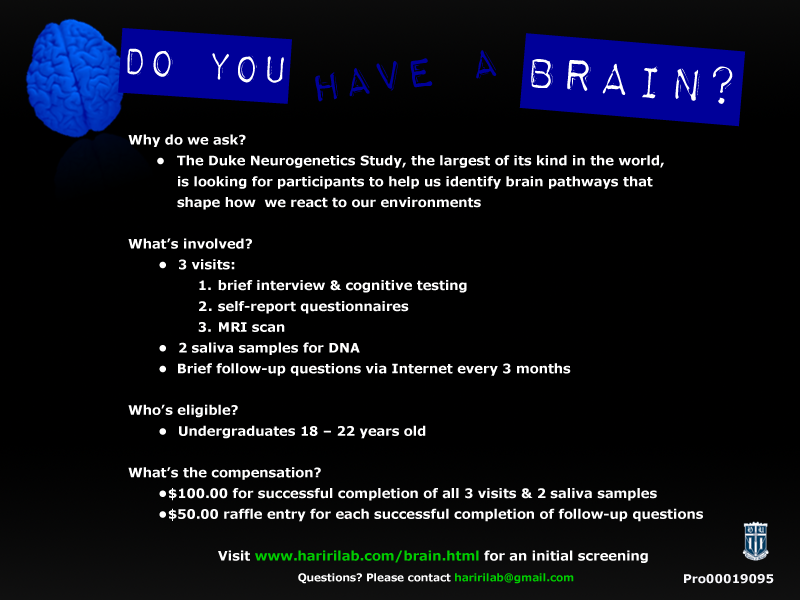
<style>
.page{position:relative;width:800px;height:600px;background:#000000}
.page>*{position:absolute;margin:0}
.t1{font:52.8px "ImpactLabel";color:#000099;scale:0.89 1}
.t2{font:61.1px "ImpactLabel";color:#000099}
.t3{font:53.1px "ImpactLabelReversed";color:#000099}
.t4{font:13px/20.8px "Verdana-Bold";color:#ffffff}
.t5{font:13px/20.8px "Verdana-Bold";color:#00cc00}
.t6{font:10.4px/20.8px "Verdana-Bold";color:#ffffff}
.t7{font:10.4px/20.8px "Verdana-Bold";color:#00cc00}
.t8{font:12px "Verdana-Bold";color:#f8f8fc}
</style>
<div class="page">
<p class="t1" style="left:118px;top:28px;width:174px;height:76px;rotate:4deg">DO YOU</p>
<p class="t2" style="left:519px;top:33px;width:227px;height:94px;rotate:5deg">BRAIN?</p>
<p class="t3" style="left:315px;top:50px;width:182px;height:52px;rotate:-8deg">HAVE A</p>
<p class="t4" style="left:128px;top:134px;width:575px;height:450px">Why do we ask?<br>     •   The Duke Neurogenetics Study, the largest of its kind in the world, <br>           is looking for participants to help us identify brain pathways that <br>           shape how  we react to our environments<br><br>What’s involved?<br>   •  3 visits:<br>       1. brief interview &amp; cognitive testing<br>       2 . self-report questionnaires<br>       3. MRI scan<br>   •  2 saliva samples for DNA<br>   •   Brief follow-up questions via Internet every 3 months<br><br>Who’s eligible?<br>   •  Undergraduates 18 – 22 years old<br><br>What’s the compensation?<br>   • $100.00 for successful completion of all 3 visits &amp; 2 saliva samples<br>   • $50.00 raffle entry for each successful completion of follow-up questions<br><br>         Visit <span class="t5">www.haririlab.com/brain.html</span> for an initial screening<br>                 <span class="t6">Questions? Please contact </span><span class="t7">haririlab@gmail.com</span></p>
<p class="t8" style="left:684px;top:574px;width:90px;height:10px">Pro00019095</p>
</div>
